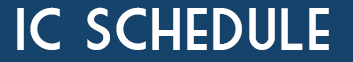
<style>
.page{position:relative;width:353px;height:62px;background:#16436c}
.page>*{position:absolute;margin:0}
.t1{font:58.3px "MarketDeco";color:#ffffff}
</style>
<div class="page">
<p class="t1" style="left:17px;top:7px;width:312px;height:43px">IC Schedule</p>
</div>
